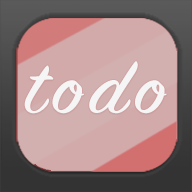
<style>
.page{position:relative;width:192px;height:192px;background:#d2aaaa}
.page>*{position:absolute;margin:0}
.t1{font:81.3px "SignPainter-HouseScript";letter-spacing:0.075em;color:#f5f5f5;scale:1.15 1}
</style>
<div class="page">
<p class="t1" style="left:24px;top:61px;width:143px;height:53px">todo</p>
</div>
